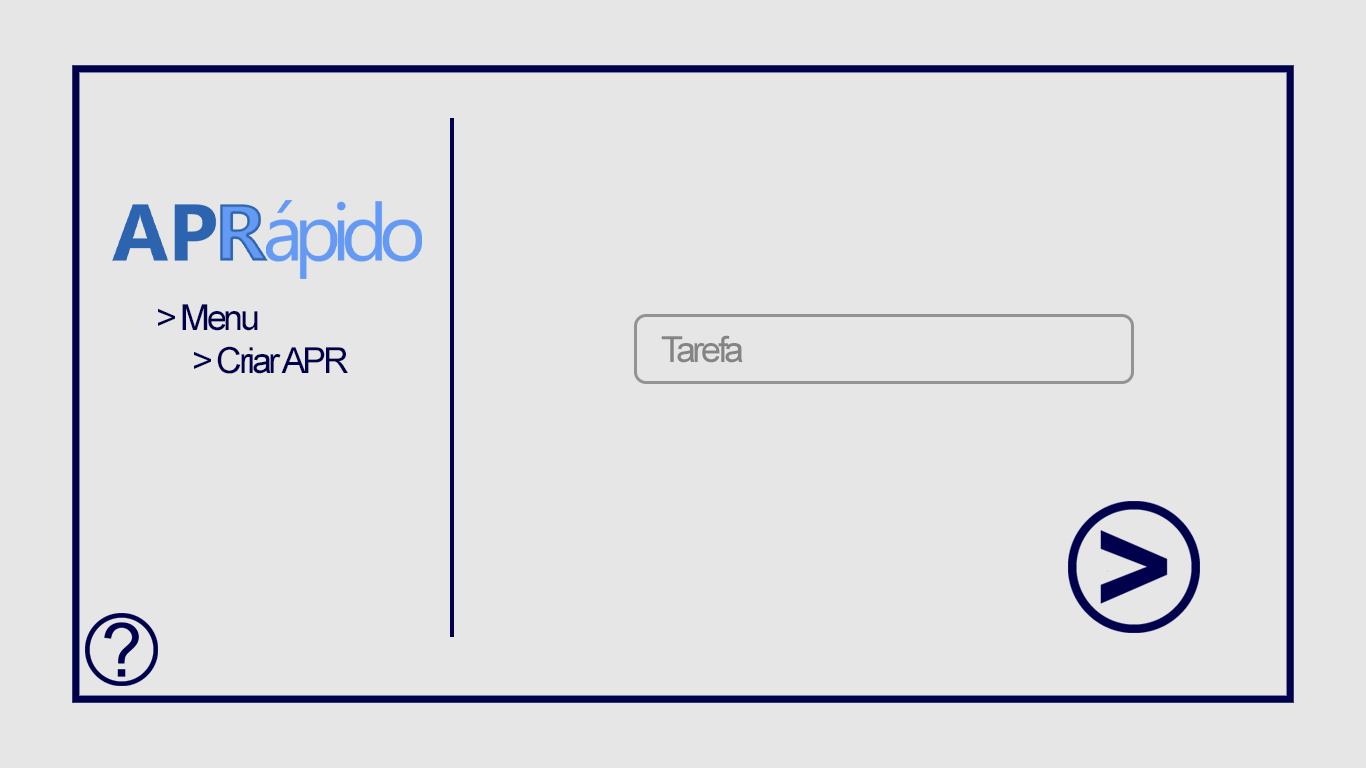
<style>
.page{position:relative;width:1366px;height:768px;background:#e6e6e6}
.page>*{position:absolute;margin:0}
.t1{font:36px "ArialMT";letter-spacing:-0.095em;color:#00004c}
.t2{font:36px "ArialMT";letter-spacing:-0.095em;color:#848484}
</style>
<div class="page">
<p class="t1" style="left:158px;top:304px;width:190px;height:70px">&gt; Menu<br> &gt; Criar APR</p>
<p class="t2" style="left:661px;top:335px;width:82px;height:28px">Tarefa</p>
</div>
